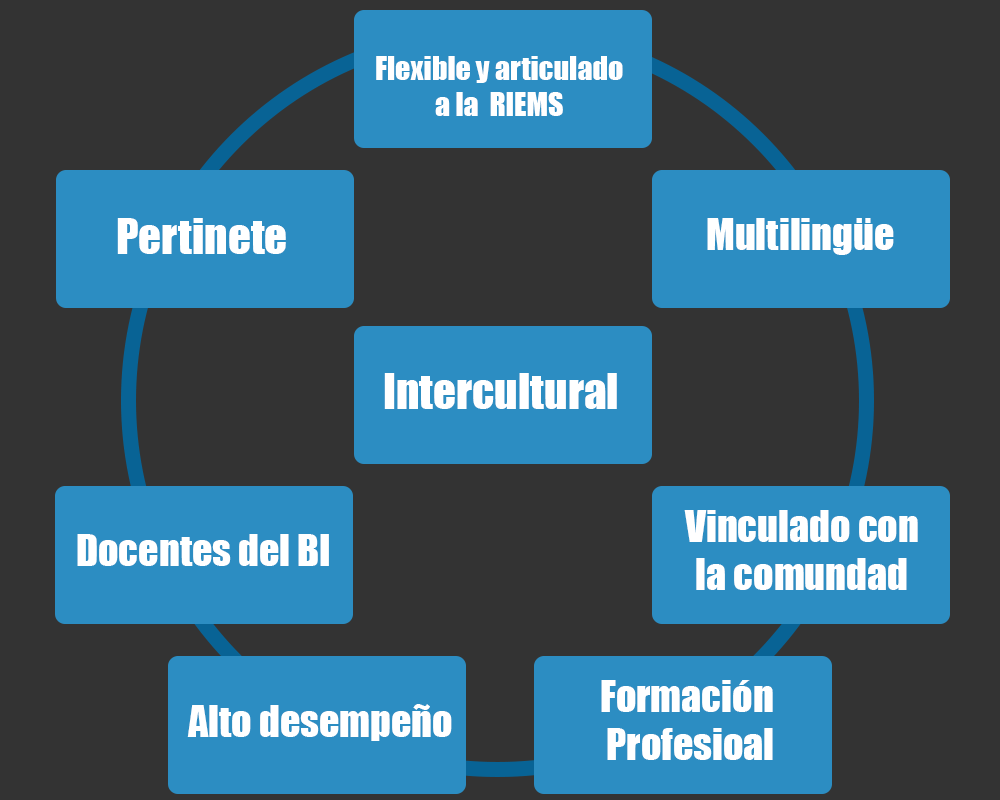
<style>
.page{position:relative;width:1000px;height:800px;background:#333333}
.page>*{position:absolute;margin:0}
.t1{font:30px "Impact";color:#ffffff}
.t2{font:45px "Impact";color:#ffffff}
.t3{font:40px "Impact";color:#ffffff}
</style>
<div class="page">
<p class="t1" style="left:376px;top:56px;width:247px;height:60px;text-align:center">Flexible y articulado<br>a la  RIEMS</p>
<p class="t2" style="left:117px;top:218px;width:169px;height:36px">Pertinete</p>
<p class="t3" style="left:707px;top:218px;width:187px;height:37px">Multilingüe</p>
<p class="t2" style="left:384px;top:373px;width:233px;height:36px">Intercultural</p>
<p class="t3" style="left:684px;top:510px;width:234px;height:80px;text-align:center">Vinculado con<br>la comundad</p>
<p class="t3" style="left:77px;top:534px;width:252px;height:32px">Docentes del BI</p>
<p class="t3" style="left:601px;top:680px;width:172px;height:80px;text-align:center">Formación <br>Profesioal</p>
<p class="t3" style="left:187px;top:704px;width:265px;height:37px">Alto desempeño</p>
</div>
